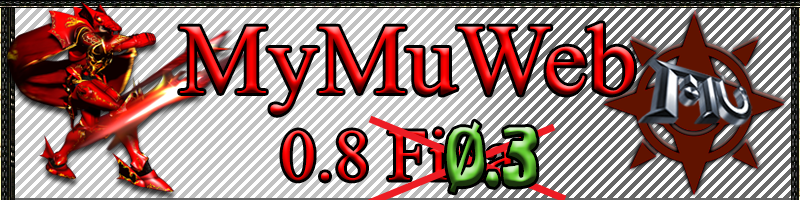
<style>
.page{position:relative;width:800px;height:200px;background:#ffffff}
.page>*{position:absolute;margin:0}
.t1{font:72px "TimesNewRomanPSMT"}
.t2{font:100px "TimesNewRomanPSMT"}
.t3{font:84px "SpongeFont-SquareType"}
</style>
<div class="page">
<p class="t1" style="left:180px;top:23px;width:454px;height:158px;text-align:center"><span class="t2">MyMuWeb<br></span>0.8 Final</p>
<p class="t3" style="left:446px;top:121px;width:91px;height:72px">0.3</p>
</div>
